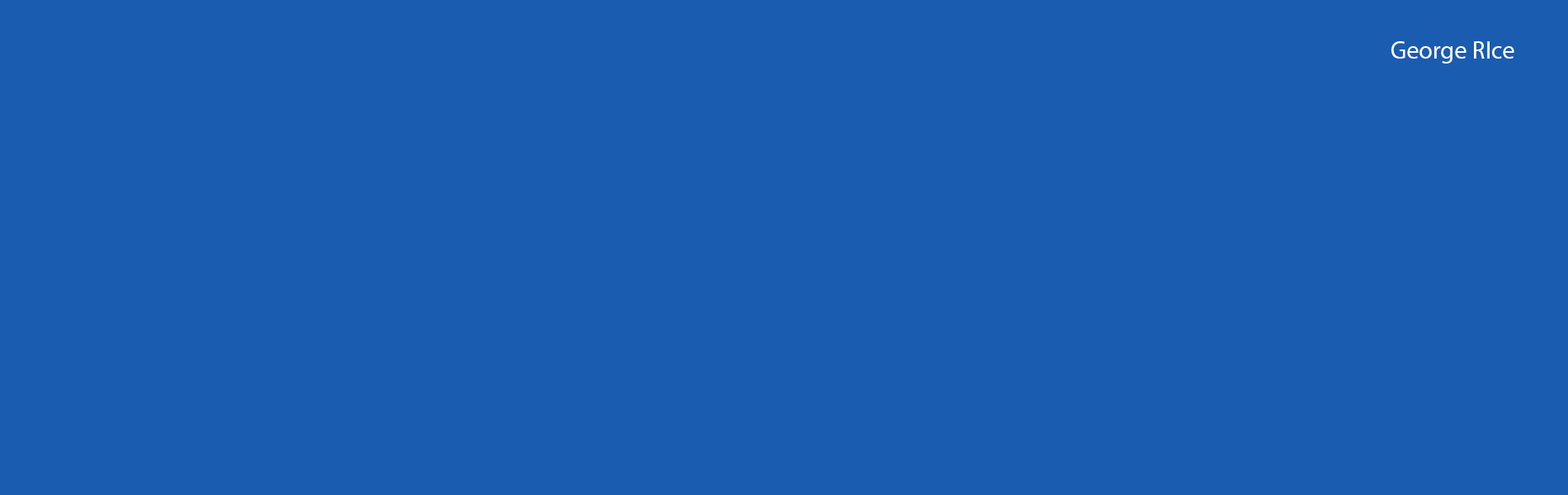
<style>
.page{position:relative;width:1568px;height:495px;background:#195cb0}
.page>*{position:absolute;margin:0}
.t1{font:24.8px "MyriadPro-Regular";color:#ffffff}
</style>
<div class="page">
<p class="t1" style="left:1391px;top:41px;width:123px;height:23px">George RIce</p>
</div>
